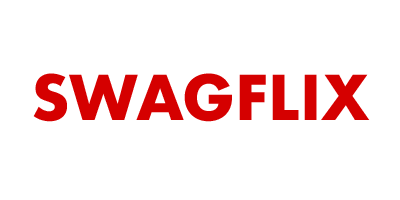
<style>
.page{position:relative;width:400px;height:200px;background:#ffffff}
.page>*{position:absolute;margin:0}
.t1{font:60px "Futura-Bold";color:#d50000}
</style>
<div class="page">
<p class="t1" style="left:33px;top:73px;width:337px;height:49px">SWAGFLIX</p>
</div>
